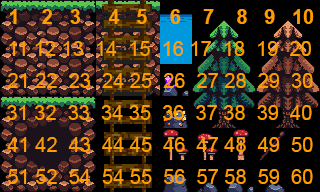
<style>
.page{position:relative;width:320px;height:192px;background:#000000}
.page>*{position:absolute;margin:0}
.t1{font:20px "Arial-BoldMT";color:#ff9d00}
.t2{font:20px "ArialMT";color:#ff9d00}
</style>
<div class="page">
<p class="t1" style="left:10px;top:9px;width:304px;height:15px">1    2   3     4   5    6    7    8   9   10</p>
<p class="t2" style="left:9px;top:41px;width:302px;height:15px">11 12 13  14  15  16 17  18  19  20</p>
<p class="t2" style="left:8px;top:73px;width:305px;height:15px">21 22  23  24 25  26  27 28  29  30</p>
<p class="t2" style="left:7px;top:105px;width:305px;height:15px">31 32  33  34 35  36  37 38  39  40</p>
<p class="t2" style="left:7px;top:137px;width:306px;height:15px">41 42  43  44 45  46  47 48  49  50</p>
<p class="t2" style="left:8px;top:169px;width:305px;height:15px">51 52  54  54 55  56  57 58  59  60</p>
</div>
